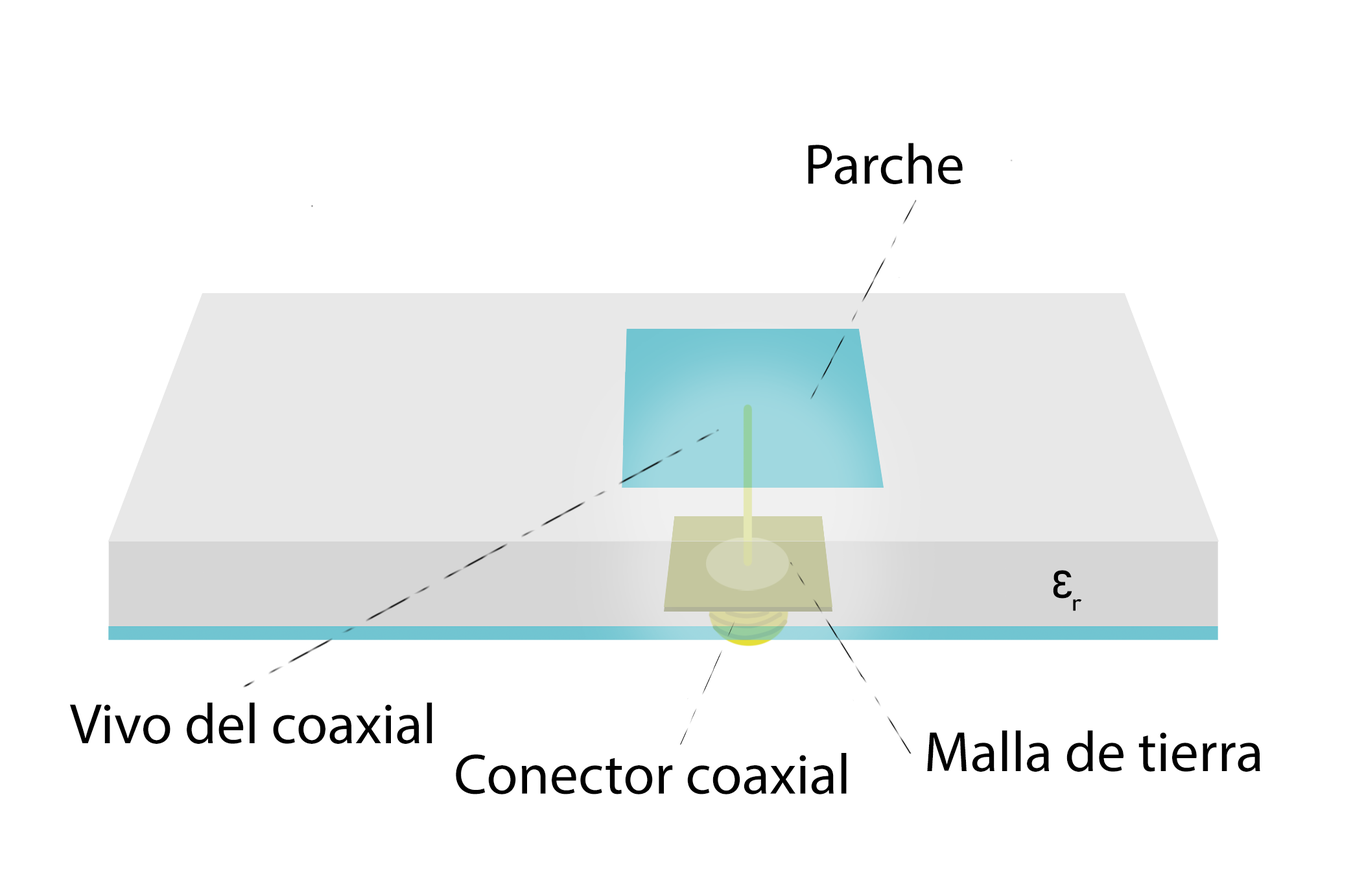
<style>
.page{position:relative;width:1353px;height:882px;background:#ffffff}
.page>*{position:absolute;margin:0}
.t1{font:98.1px "MyriadPro-Regular";color:#000000}
.t2{font:38.6px "Bahnschrift";letter-spacing:-0.06em;color:#000000;font-weight:bold;font-style:italic;scale:1.1 1}
</style>
<div class="page">
<p class="t1" style="left:808px;top:143px;width:155px;height:42px">Parche</p>
<p class="t2" style="left:1053px;top:570px;width:29px;height:41px">Ɛr</p>
<p class="t1" style="left:69px;top:702px;width:363px;height:41px">Vivo del coaxial</p>
<p class="t1" style="left:927px;top:730px;width:333px;height:41px">Malla de tierra</p>
<p class="t1" style="left:456px;top:753px;width:391px;height:41px">Conector coaxial</p>
</div>
